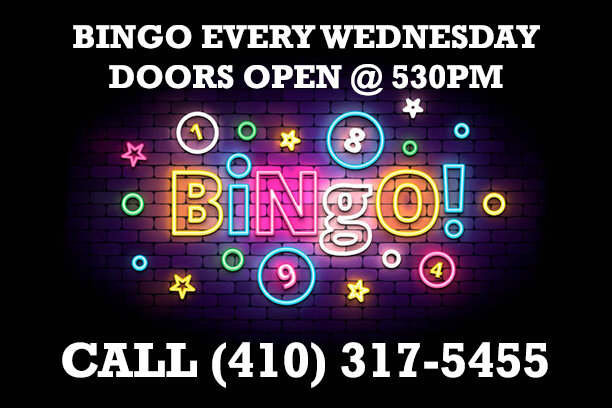
<style>
.page{position:relative;width:612px;height:408px;background:#010101}
.page>*{position:absolute;margin:0}
.t1{font:33.3px "Rockwell-Bold";color:#ffffff}
.t2{font:50px "Rockwell-Bold";color:#ffffff}
</style>
<div class="page">
<p class="t1" style="left:73px;top:25px;width:467px;height:71px;text-align:center">BINGO EVERY WEDNESDAY<br>DOORS OPEN @ 530PM</p>
<p class="t2" style="left:62px;top:342px;width:486px;height:46px">CALL (410) 317-5455</p>
</div>
